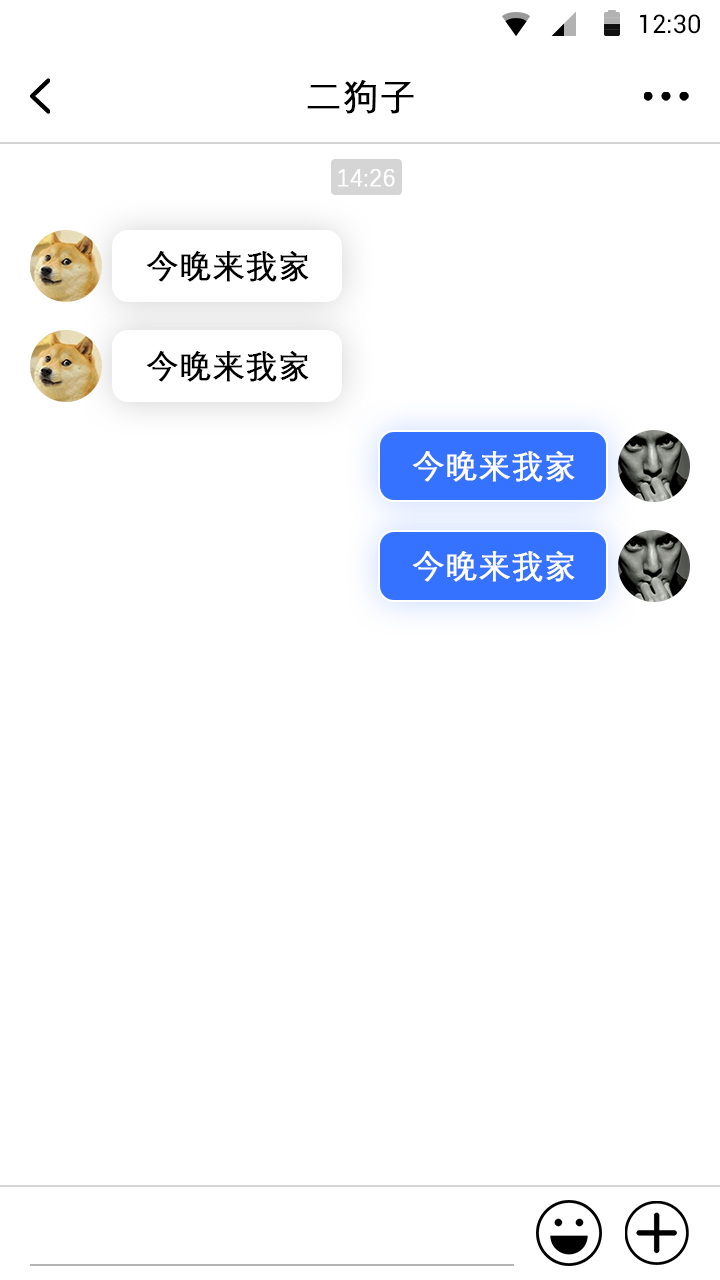
<style>
.page{position:relative;width:720px;height:1280px;background:#ffffff}
.page>*{position:absolute;margin:0}
.t1{font:25.4px "Roboto-Regular";color:#000000}
.t2{font:36px "DengXian-Regular";color:#000000;font-weight:bold}
.t3{font:24px "DengXian-Regular";color:#fefefe;font-weight:bold}
.t4{font:32px "DengXian-Regular";color:#000000;font-weight:bold}
.t5{font:32px "DengXian-Regular";color:#ffffff;font-weight:bold}
.t6{font:32px "DengXian-Regular";color:#fefefe;font-weight:bold}
</style>
<div class="page">
<p class="t1" style="left:640px;top:14px;width:60px;height:20px">12:30</p>
<p class="t2" style="left:307px;top:80px;width:107px;height:34px">二狗子</p>
<p class="t3" style="left:338px;top:169px;width:57px;height:18px">14:26</p>
<p class="t4" style="left:146px;top:251px;width:163px;height:31px">今晚来我家</p>
<p class="t4" style="left:146px;top:351px;width:163px;height:31px">今晚来我家</p>
<p class="t5" style="left:412px;top:451px;width:163px;height:31px">今晚来我家</p>
<p class="t6" style="left:412px;top:551px;width:163px;height:31px">今晚来我家</p>
</div>
